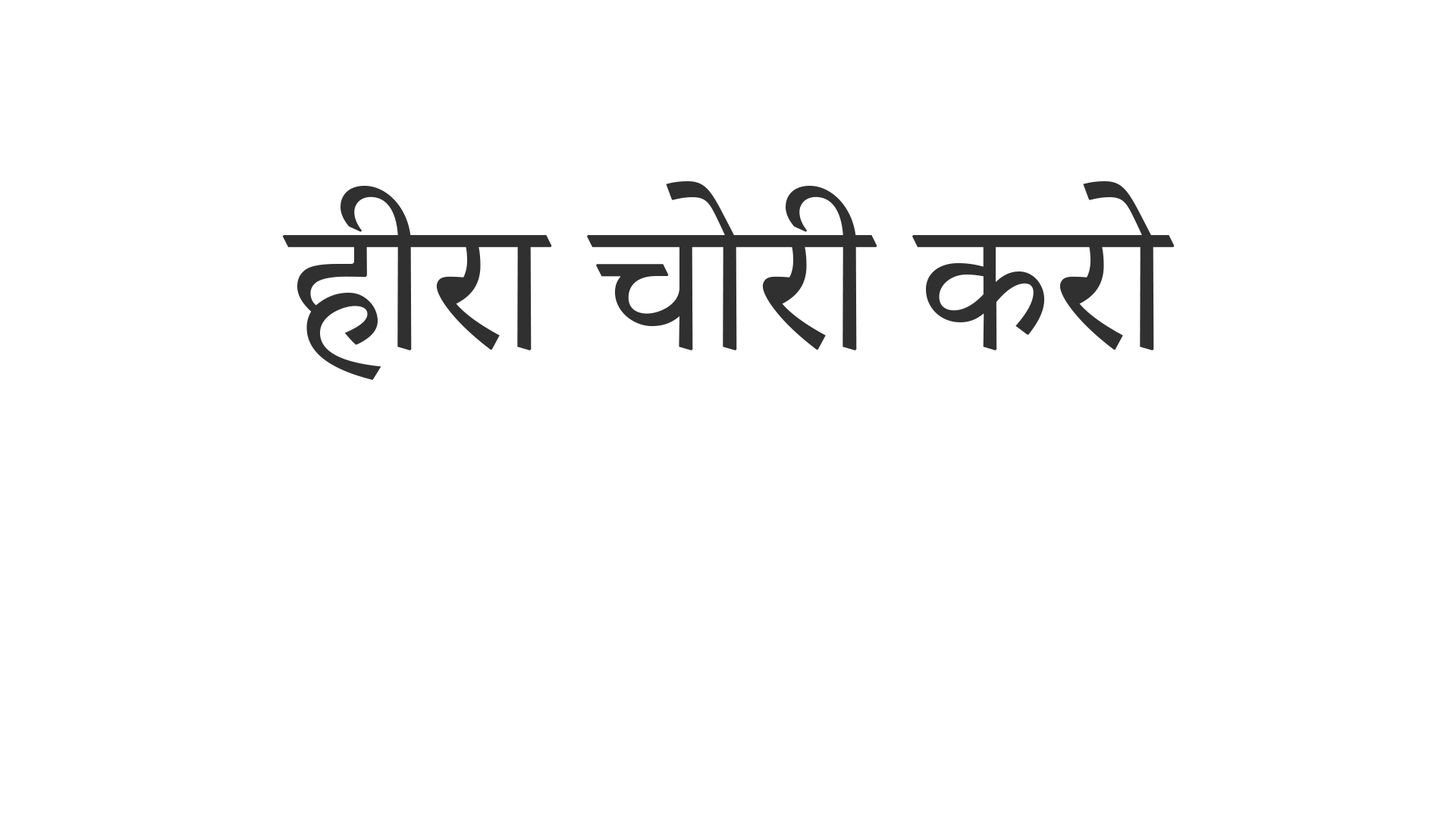
<style>
.page{position:relative;width:1456px;height:819px;background:#ffffff}
.page>*{position:absolute;margin:0}
.t1{font:227.5px "AdobeDevanagari-Regular";color:#303030}
</style>
<div class="page">
<p class="t1" style="left:282px;top:181px;width:893px;height:199px">हीरा चोरी करो</p>
</div>
